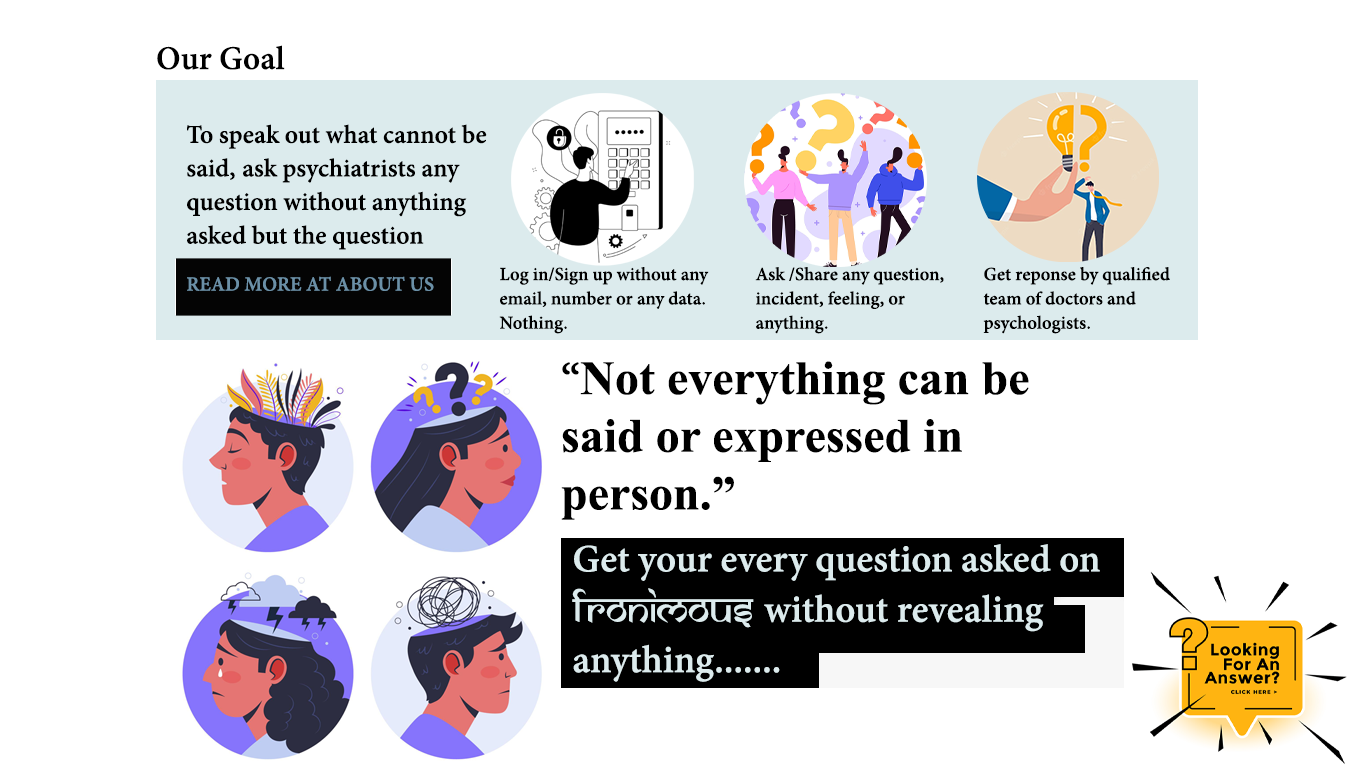
<style>
.page{position:relative;width:1366px;height:768px;background:#ffffff}
.page>*{position:absolute;margin:0}
.t1{font:36px "AdobeDevanagari-Bold";color:#000000}
.t2{font:28px "AdobeDevanagari-Bold";color:#000000}
.t3{font:20.3px "AdobeDevanagari-Bold";color:#000000}
.t4{font:22px "AdobeDevanagari-Bold";color:#6b90a7}
.t5{font:48px "TimesNewRomanPS-BoldMT";color:#000000}
.t6{font:48px "AdobeDevanagari-Bold";color:#000000}
.t7{font:42px "AdobeDevanagari-Bold";color:#dcebed}
.t8{font:42px "SamarkanNormal";color:#dcebed}
</style>
<div class="page">
<p class="t1" style="left:157px;top:45px;width:128px;height:25px">Our Goal</p>
<p class="t2" style="left:187px;top:124px;width:300px;height:126px">To speak out what cannot be said, ask psychiatrists any question without anything asked but the question</p>
<p class="t3" style="left:499px;top:267px;width:210px;height:67px">Log in/Sign up without any email, number or any data. Nothing.</p>
<p class="t3" style="left:755px;top:267px;width:189px;height:67px">Ask /Share any question, incident, feeling, or anything.</p>
<p class="t3" style="left:983px;top:267px;width:187px;height:67px">Get reponse by qualified team of doctors and psychologists.</p>
<p class="t4" style="left:187px;top:276px;width:247px;height:15px">READ MORE AT ABOUT US</p>
<p class="t5" style="left:561px;top:361px;width:468px;height:159px"><span class="t6">“</span>Not everything can be                 said or expressed in  person.”</p>
<p class="t7" style="left:572px;top:544px;width:528px;height:138px">Get your every question asked on <span class="t8">fronimous </span>without revealing anything.......</p>
</div>
